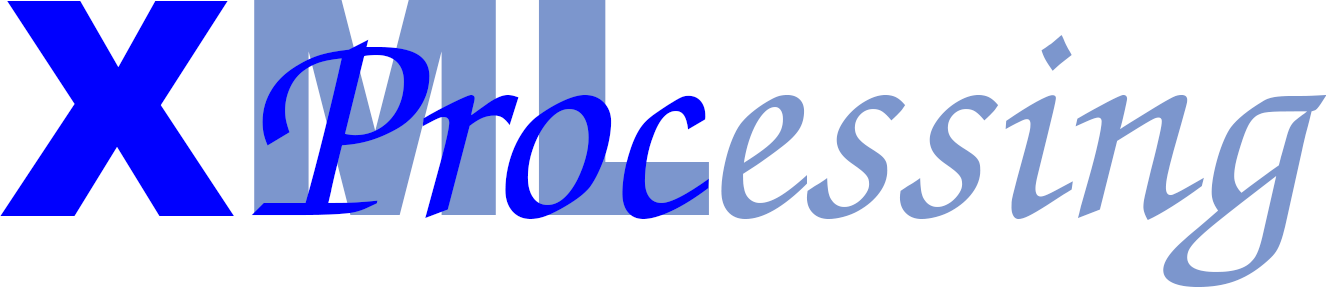
<style>
.page{position:relative;width:1326px;height:287px;background:#ffffff}
.page>*{position:absolute;margin:0}
.t1{font:300px "Arial-Black";color:#0000ff}
.t2{font:300px "Arial-Black";color:#7c96cd}
.t3{font:291.7px "URWChanceryL-MediItal";color:#0000ff}
.t4{font:291.7px "URWChanceryL-MediItal";color:#7c96cd}
</style>
<div class="page">
<p class="t1" style="left:0px;top:1px;width:234px;height:215px">X</p>
<p class="t2" style="left:254px;top:0px;width:455px;height:215px">ML</p>
<p class="t3" style="left:251px;top:39px;width:458px;height:180px">Proc</p>
<p class="t4" style="left:721px;top:35px;width:605px;height:252px">essing</p>
</div>
